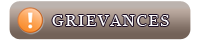
<style>
.page{position:relative;width:200px;height:40px}
.page>*{position:absolute;margin:0}
.t1{font:16px "Georgia";letter-spacing:0.1em;color:#fdfdfd}
</style>
<div class="page">
<p class="t1" style="left:52px;top:15px;width:117px;height:11px">GRIEVANCES</p>
</div>
